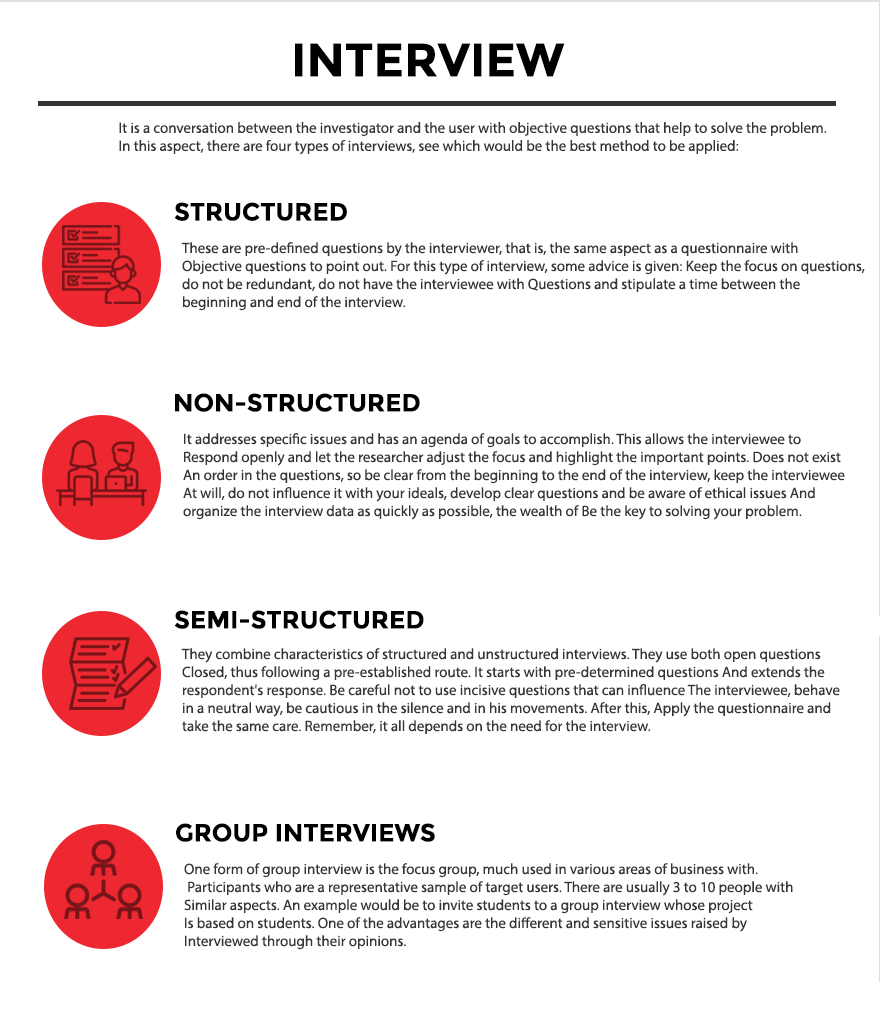
<style>
.page{position:relative;width:880px;height:1034px;background:#ffffff}
.page>*{position:absolute;margin:0}
.t1{font:47px "Montserrat-Bold";color:#000000}
.t2{font:15px/18px "MyriadPro-Regular";color:#353535}
.t3{font:25px "Montserrat-Bold";color:#000000}
.t4{font:15px "MyriadPro-Regular";color:#353535}
</style>
<div class="page">
<p class="t1" style="left:295px;top:43px;width:270px;height:34px">INTERVIEW</p>
<p class="t2" style="left:119px;top:122px;width:708px;height:33px">It is a conversation between the investigator and the user with objective questions that help to solve the problem.<br>In this aspect, there are four types of interviews, see which would be the best method to be applied:</p>
<p class="t3" style="left:174px;top:202px;width:173px;height:19px">STRUCTURED</p>
<p class="t4" style="left:181px;top:242px;width:684px;height:69px">These are pre-defined questions by the interviewer, that is, the same aspect as a questionnaire with <br>Objective questions to point out. For this type of interview, some advice is given: Keep the focus on questions, <br>do not be redundant, do not have the interviewee with Questions and stipulate a time between the <br>beginning and end of the interview.</p>
<p class="t3" style="left:175px;top:393px;width:245px;height:19px">NON-STRUCTURED</p>
<p class="t4" style="left:183px;top:433px;width:662px;height:87px">It addresses specific issues and has an agenda of goals to accomplish. This allows the interviewee to<br>Respond openly and let the researcher adjust the focus and highlight the important points. Does not exist<br>An order in the questions, so be clear from the beginning to the end of the interview, keep the interviewee<br>At will, do not influence it with your ideals, develop clear questions and be aware of ethical issues And <br>organize the interview data as quickly as possible, the wealth of Be the key to solving your problem.</p>
<p class="t3" style="left:174px;top:610px;width:250px;height:19px">SEMI-STRUCTURED</p>
<p class="t4" style="left:181px;top:648px;width:659px;height:86px">They combine characteristics of structured and unstructured interviews. They use both open questions<br>Closed, thus following a pre-established route. It starts with pre-determined questions And extends the <br>respondent's response. Be careful not to use incisive questions that can influence The interviewee, behave <br>in a neutral way, be cautious in the silence and in his movements. After this, Apply the questionnaire and <br>take the same care. Remember, it all depends on the need for the interview.</p>
<p class="t3" style="left:176px;top:823px;width:259px;height:19px">GROUP INTERVIEWS</p>
<p class="t4" style="left:184px;top:863px;width:609px;height:87px">One form of group interview is the focus group, much used in various areas of business with.<br> Participants who are a representative sample of target users. There are usually 3 to 10 people with<br>Similar aspects. An example would be to invite students to a group interview whose project<br>Is based on students. One of the advantages are the different and sensitive issues raised by<br>Interviewed through their opinions.</p>
</div>
